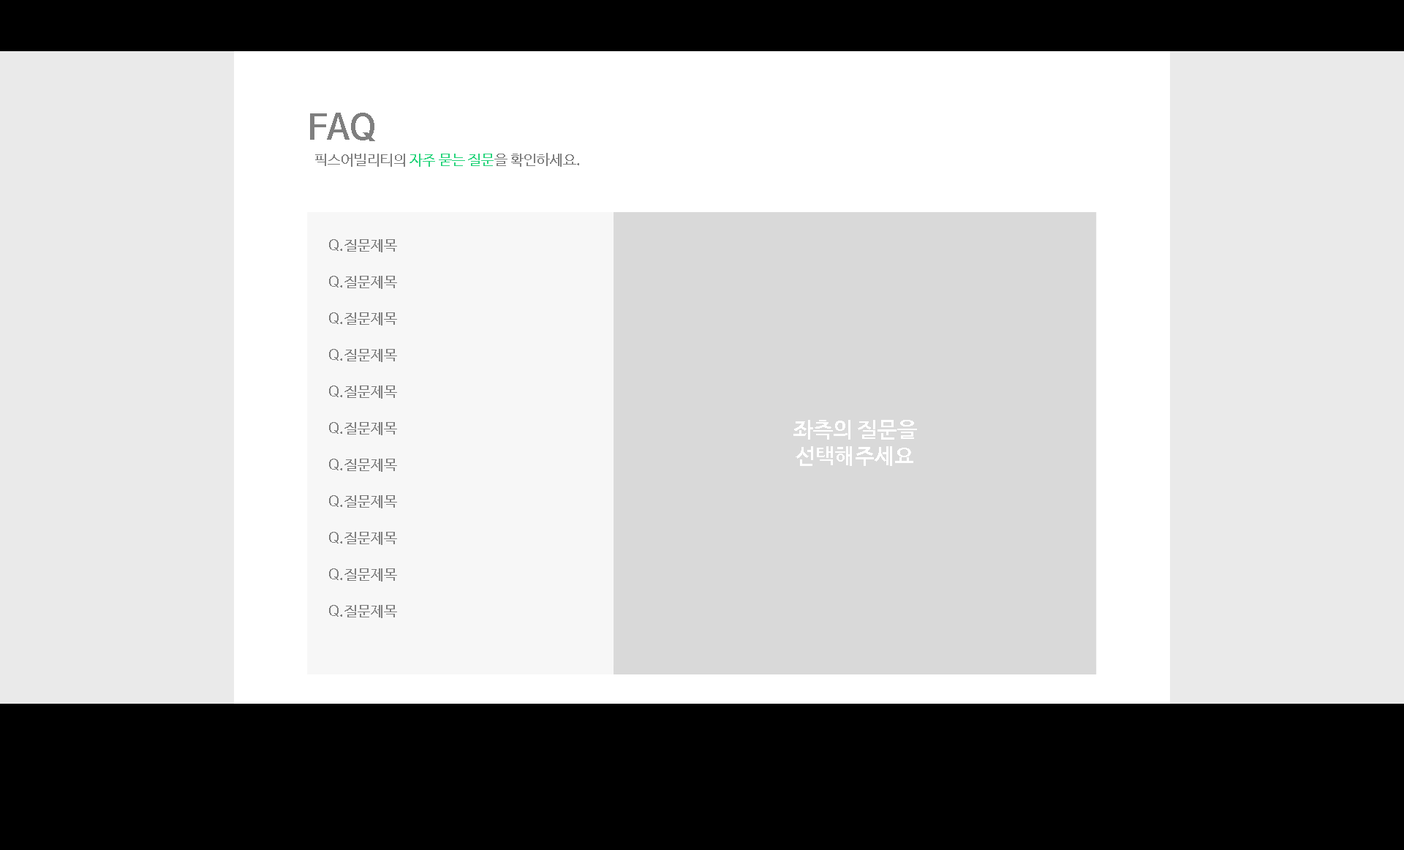
<style>
.page{position:relative;width:1404px;height:850px;background:#eaeaea}
.page>*{position:absolute;margin:0}
.t1{font:35.1px "NanumBarunGothicBold";color:#7f7f7f}
.t2{font:14.6px "NanumBarunGothic";color:#28d47c}
.t3{font:14.6px "NanumBarunGothic";color:#7f7f7f}
.t4{font:21.9px "NanumBarunGothicBold";color:#ffffff}
</style>
<div class="page">
<p class="t1" style="left:310px;top:113px;width:65px;height:28px">FAQ</p>
<p class="t2" style="left:315px;top:153px;width:264px;height:14px"><span class="t3">픽스어빌리티의 </span>자주 묻는 질문<span class="t3">을 확인하세요.</span></p>
<p class="t3" style="left:329px;top:239px;width:13px;height:12px">Q.</p>
<p class="t3" style="left:344px;top:239px;width:53px;height:13px">질문제목</p>
<p class="t3" style="left:329px;top:276px;width:13px;height:11px">Q.</p>
<p class="t3" style="left:344px;top:276px;width:53px;height:13px">질문제목</p>
<p class="t3" style="left:329px;top:312px;width:13px;height:12px">Q.</p>
<p class="t3" style="left:344px;top:312px;width:53px;height:13px">질문제목</p>
<p class="t3" style="left:329px;top:349px;width:13px;height:11px">Q.</p>
<p class="t3" style="left:344px;top:349px;width:53px;height:13px">질문제목</p>
<p class="t3" style="left:329px;top:385px;width:13px;height:12px">Q.</p>
<p class="t3" style="left:344px;top:385px;width:53px;height:13px">질문제목</p>
<p class="t3" style="left:329px;top:422px;width:13px;height:12px">Q.</p>
<p class="t3" style="left:344px;top:422px;width:53px;height:13px">질문제목</p>
<p class="t4" style="left:793px;top:420px;width:124px;height:46px;text-align:center">좌측의 질문을<br>선택해주세요</p>
<p class="t3" style="left:329px;top:458px;width:13px;height:12px">Q.</p>
<p class="t3" style="left:344px;top:458px;width:53px;height:14px">질문제목</p>
<p class="t3" style="left:329px;top:495px;width:13px;height:12px">Q.</p>
<p class="t3" style="left:344px;top:495px;width:53px;height:13px">질문제목</p>
<p class="t3" style="left:329px;top:531px;width:13px;height:12px">Q.</p>
<p class="t3" style="left:344px;top:531px;width:53px;height:14px">질문제목</p>
<p class="t3" style="left:329px;top:568px;width:13px;height:12px">Q.</p>
<p class="t3" style="left:344px;top:568px;width:53px;height:13px">질문제목</p>
<p class="t3" style="left:329px;top:605px;width:13px;height:11px">Q.</p>
<p class="t3" style="left:344px;top:605px;width:53px;height:13px">질문제목</p>
</div>
